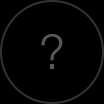
<style>
.page{position:relative;width:104px;height:104px;background:#000000}
.page>*{position:absolute;margin:0}
.t1{font:48px "HelveticaNeue-Light";color:#585858}
</style>
<div class="page">
<p class="t1" style="left:41px;top:34px;width:22px;height:35px">?</p>
</div>
